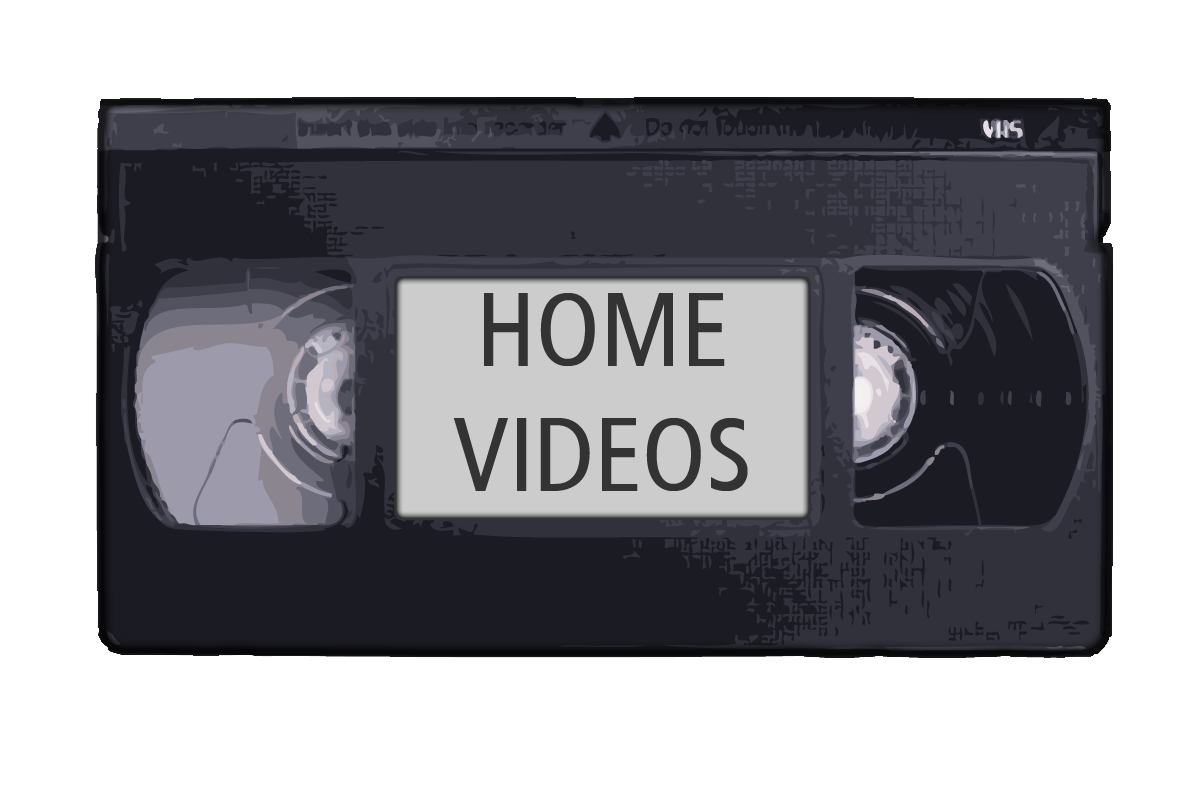
<style>
.page{position:relative;width:1202px;height:802px;background:#ffffff}
.page>*{position:absolute;margin:0}
.t1{font:104.2px "ArticulateNarrow";color:#333333}
</style>
<div class="page">
<p class="t1" style="left:453px;top:293px;width:295px;height:198px;text-align:center">HOME VIDEOS</p>
</div>
